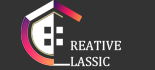
<style>
.page{position:relative;width:155px;height:70px;background:#333333}
.page>*{position:absolute;margin:0}
.t1{font:13.1px/15.8px "Cambria";color:#ffffff;text-transform:uppercase}
</style>
<div class="page">
<p class="t1" style="left:70px;top:40px;width:51px;height:27px">reative<br>lassic</p>
</div>
